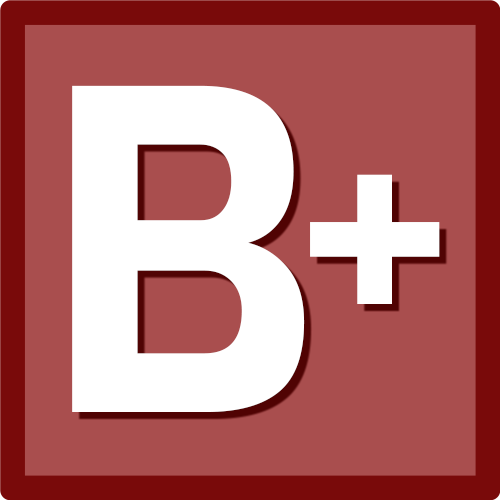
<style>
.page{position:relative;width:500px;height:500px;background:#a94e4e}
.page>*{position:absolute;margin:0}
.t1{font:440.7px "Exo-Bold";color:#ffffff}
.t2{font:288.3px "Exo-Bold";color:#ffffff}
</style>
<div class="page">
<p class="t1" style="left:72px;top:85px;width:233px;height:327px">B</p>
<p class="t2" style="left:310px;top:174px;width:130px;height:130px">+</p>
</div>
